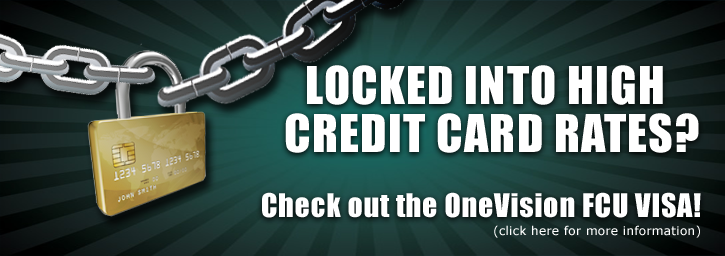
<style>
.page{position:relative;width:725px;height:256px}
.page>*{position:absolute;margin:0}
.t1{font:48px/48px "Impact";letter-spacing:0.025em;color:#ffffff}
.t2{font:30px "Impact";letter-spacing:0.025em;color:#ffffff}
.t3{font:12px "Verdana";letter-spacing:0.025em;color:#ffffff}
</style>
<div class="page">
<p class="t1" style="left:285px;top:65px;width:414px;height:88px;text-align:center">LOCKED INTO HIGH <br>CREDIT CARD RATES?</p>
<p class="t2" style="left:262px;top:192px;width:439px;height:26px">Check out the OneVision FCU VISA!</p>
<p class="t3" style="left:494px;top:225px;width:206px;height:13px">(click here for more information)</p>
</div>
